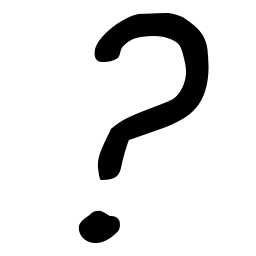
<style>
.page{position:relative;width:256px;height:256px;background:#ffffff}
.page>*{position:absolute;margin:0}
.t1{font:298px "SegoeScript";color:#000000}
</style>
<div class="page">
<p class="t1" style="left:78px;top:13px;width:131px;height:230px">?</p>
</div>
